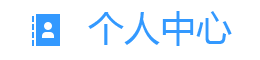
<style>
.page{position:relative;width:260px;height:60px;background:#ffffff}
.page>*{position:absolute;margin:0}
.t1{font:36px "MicrosoftYaHei";color:#3399ff}
</style>
<div class="page">
<p class="t1" style="left:88px;top:11px;width:144px;height:35px">个人中心</p>
</div>
